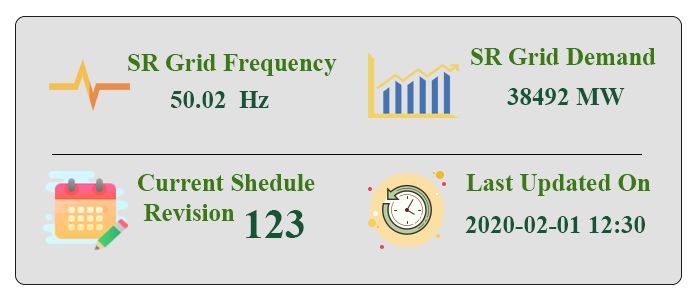
<style>
.page{position:relative;width:700px;height:300px;background:#e1e1e1}
.page>*{position:absolute;margin:0}
.t1{font:25px "TimesNewRomanPS-BoldMT";color:#397b11}
.t2{font:25px "TimesNewRomanPS-BoldMT";color:#155536}
.t3{font:41.7px "TimesNewRomanPS-BoldMT";color:#155536}
</style>
<div class="page">
<p class="t1" style="left:128px;top:54px;width:209px;height:22px">SR Grid Frequency</p>
<p class="t1" style="left:471px;top:48px;width:185px;height:17px">SR Grid Demand</p>
<p class="t2" style="left:507px;top:88px;width:118px;height:17px">38492 MW</p>
<p class="t2" style="left:170px;top:91px;width:99px;height:17px">50.02  Hz</p>
<p class="t1" style="left:138px;top:174px;width:177px;height:47px">Current Shedule<br> Revision</p>
<p class="t1" style="left:466px;top:174px;width:185px;height:22px">Last Updated On</p>
<p class="t3" style="left:245px;top:210px;width:59px;height:28px">123</p>
<p class="t2" style="left:465px;top:216px;width:180px;height:17px">2020-02-01 12:30</p>
</div>
